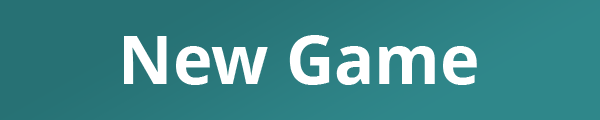
<style>
.page{position:relative;width:600px;height:120px}
.page>*{position:absolute;margin:0}
.t1{font:66.7px "NotoSans-Bold";color:#ffffff}
</style>
<div class="page">
<p class="t1" style="left:124px;top:35px;width:353px;height:50px">New Game</p>
</div>
